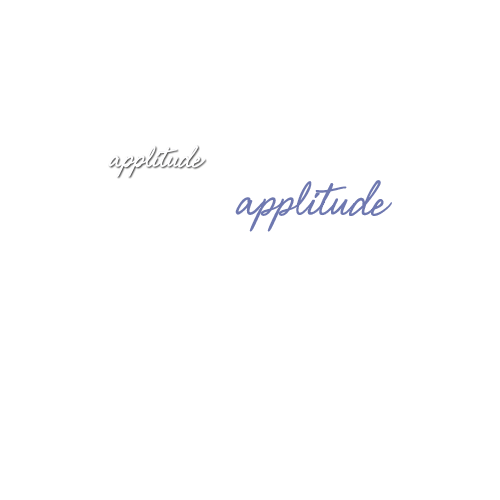
<style>
.page{position:relative;width:500px;height:500px;background:#ffffff}
.page>*{position:absolute;margin:0}
.t1{font:65px "ShimmerBoldOT";color:#6e78b0}
</style>
<div class="page">
<p class="t1" style="left:235px;top:180px;width:157px;height:52px">applitude</p>
</div>
